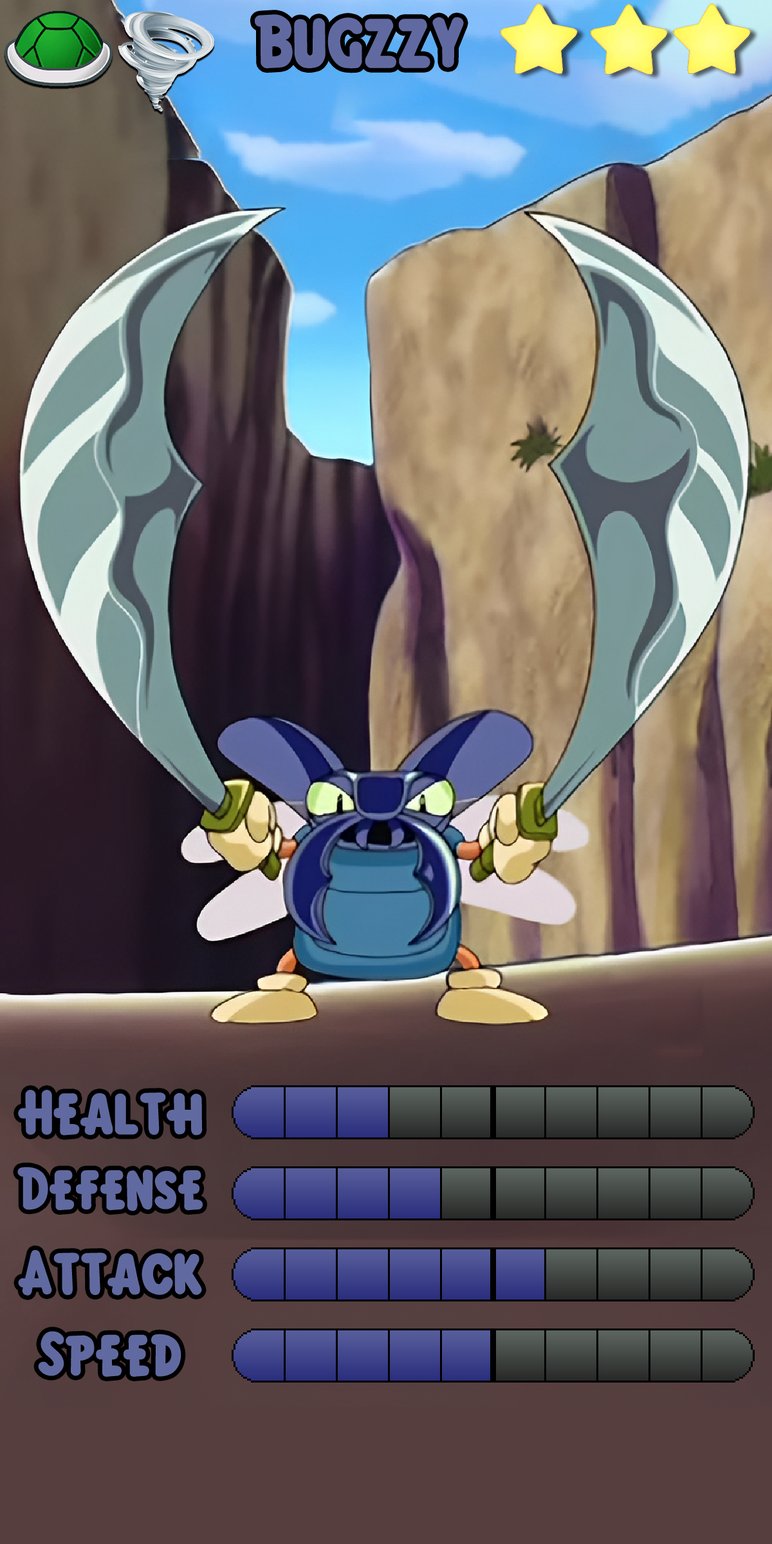
<style>
.page{position:relative;width:772px;height:1544px}
.page>*{position:absolute;margin:0}
.t1{font:115.8px "KirbyClassic";color:#616aa0}
.t2{font:96.5px "KirbyClassic";color:#616aa0}
.t3{font:92px "KirbyClassic";color:#616aa0}
</style>
<div class="page">
<p class="t1" style="left:255px;top:14px;width:209px;height:55px">Bugzzy</p>
<p class="t2" style="left:18px;top:1090px;width:185px;height:46px">Health</p>
<p class="t3" style="left:17px;top:1167px;width:186px;height:45px">Defense</p>
<p class="t2" style="left:18px;top:1250px;width:184px;height:46px">Attack</p>
<p class="t2" style="left:38px;top:1331px;width:143px;height:46px">Speed</p>
</div>
